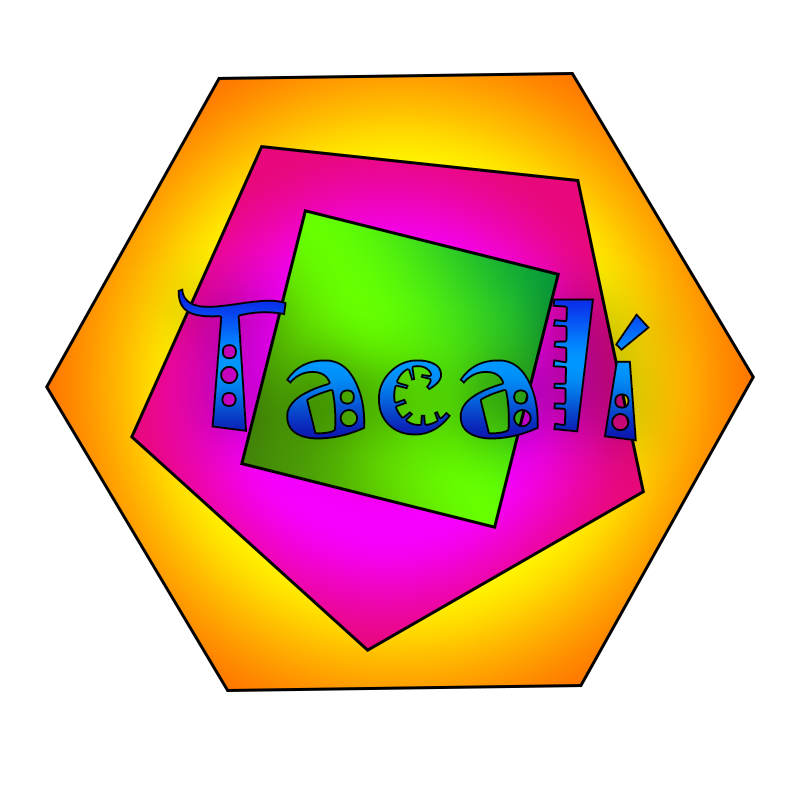
<style>
.page{position:relative;width:800px;height:800px;background:#ffffff}
.page>*{position:absolute;margin:0}
.t1{font:160px "Jokerman-Regular"}
</style>
<div class="page">
<p class="t1" style="left:177px;top:288px;width:473px;height:154px">Tacalí</p>
</div>
